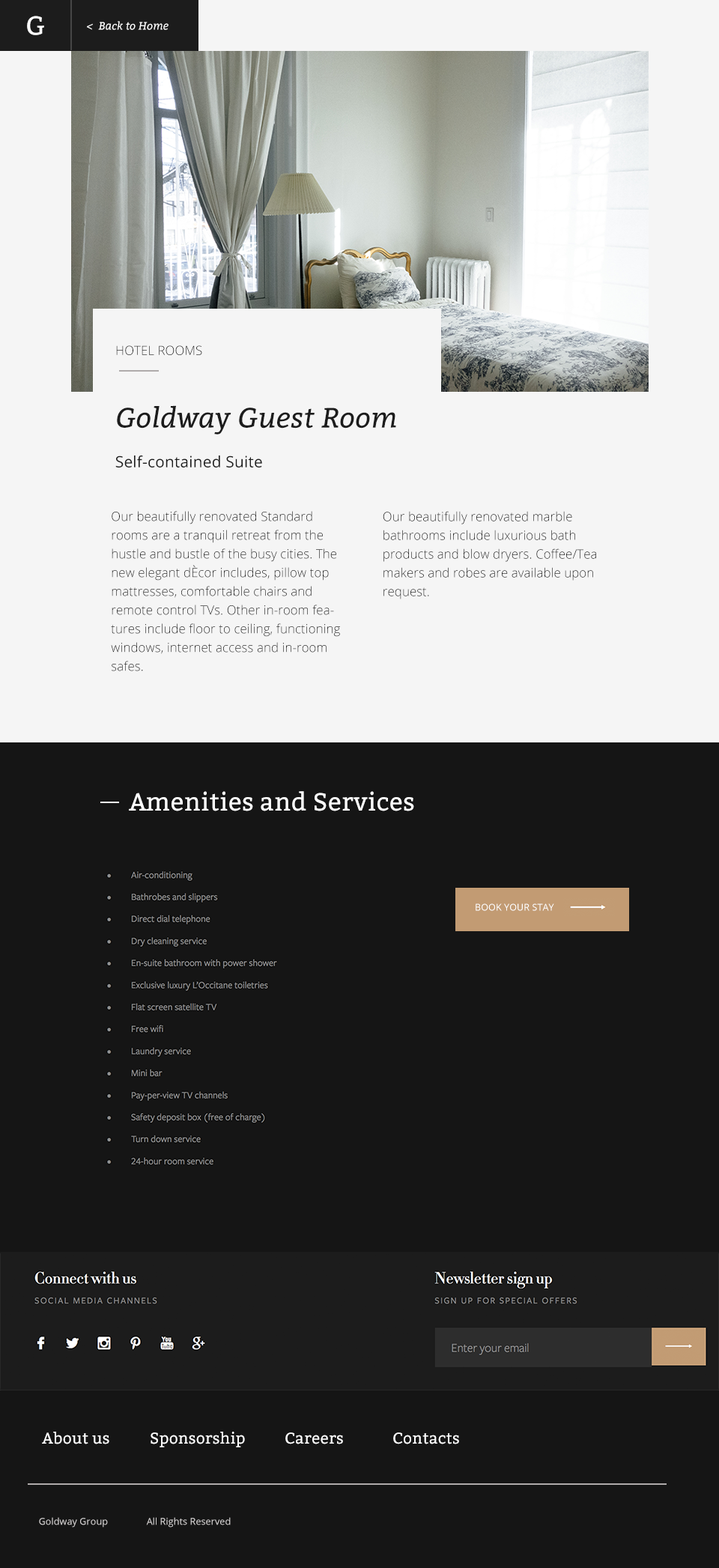
<style>
.page{position:relative;width:719px;height:1568px;background:#151515}
.page>*{position:absolute;margin:0}
.t1{font:25.9px "Bitter-Regular";letter-spacing:0.01em;color:#ffffff}
.t2{font:10.8px "Bitter-Italic";letter-spacing:0.01em;color:#ffffff}
.t3{font:12.5px "OpenSans-Light";letter-spacing:0.01em;color:#1c1c1c}
.t4{font:28.1px "Bitter-Italic";letter-spacing:0.01em;color:#1c1c1c}
.t5{font:15.6px "OpenSans";letter-spacing:0.01em;color:#1c1c1c}
.t6{font:12.5px/18.7px "OpenSans-Light";letter-spacing:0.01em;color:#1c1c1c}
.t7{font:25px "Bitter-Regular";letter-spacing:0.01em;color:#ffffff}
.t8{font:9.4px "OpenSans";letter-spacing:0.01em;color:#ffffff}
.t9{font:15.6px "Bitter-Regular";letter-spacing:0.01em;color:#ffffff}
.t10{font:9.4px "OpenSans";letter-spacing:0.01em;color:#d7d4d4}
</style>
<div class="page">
<p class="t1" style="left:27px;top:16px;width:17px;height:19px">G</p>
<p class="t2" style="left:87px;top:21px;width:82px;height:9px">&lt;  Back to Home</p>
<p class="t3" style="left:116px;top:345px;width:86px;height:10px">HOTEL ROOMS</p>
<p class="t4" style="left:117px;top:405px;width:279px;height:30px">Goldway Guest Room</p>
<p class="t5" style="left:115px;top:455px;width:147px;height:12px">Self-contained Suite</p>
<p class="t6" style="left:111px;top:511px;width:229px;height:160px">Our beautifully renovated Standard rooms are a tranquil retreat from the hustle and bustle of the busy cities. The new elegant dÈcor includes, pillow top mattresses, comfortable chairs and remote control TVs. Other in-room features include floor to ceiling, functioning windows, internet access and in-room safes.</p>
<p class="t6" style="left:383px;top:511px;width:213px;height:88px">Our beautifully renovated marble bathrooms include luxurious bath products and blow dryers. Coffee/Tea makers and robes are available upon request.</p>
<p class="t7" style="left:129px;top:791px;width:285px;height:20px">Amenities and Services</p>
<p class="t8" style="left:476px;top:903px;width:78px;height:8px">BOOK YOUR STAY</p>
<p class="t9" style="left:42px;top:1432px;width:417px;height:15px">About us  Sponsorship  Careers  Contacts</p>
<p class="t10" style="left:39px;top:1517px;width:192px;height:11px">Goldway Group  All Rights Reserved</p>
</div>
